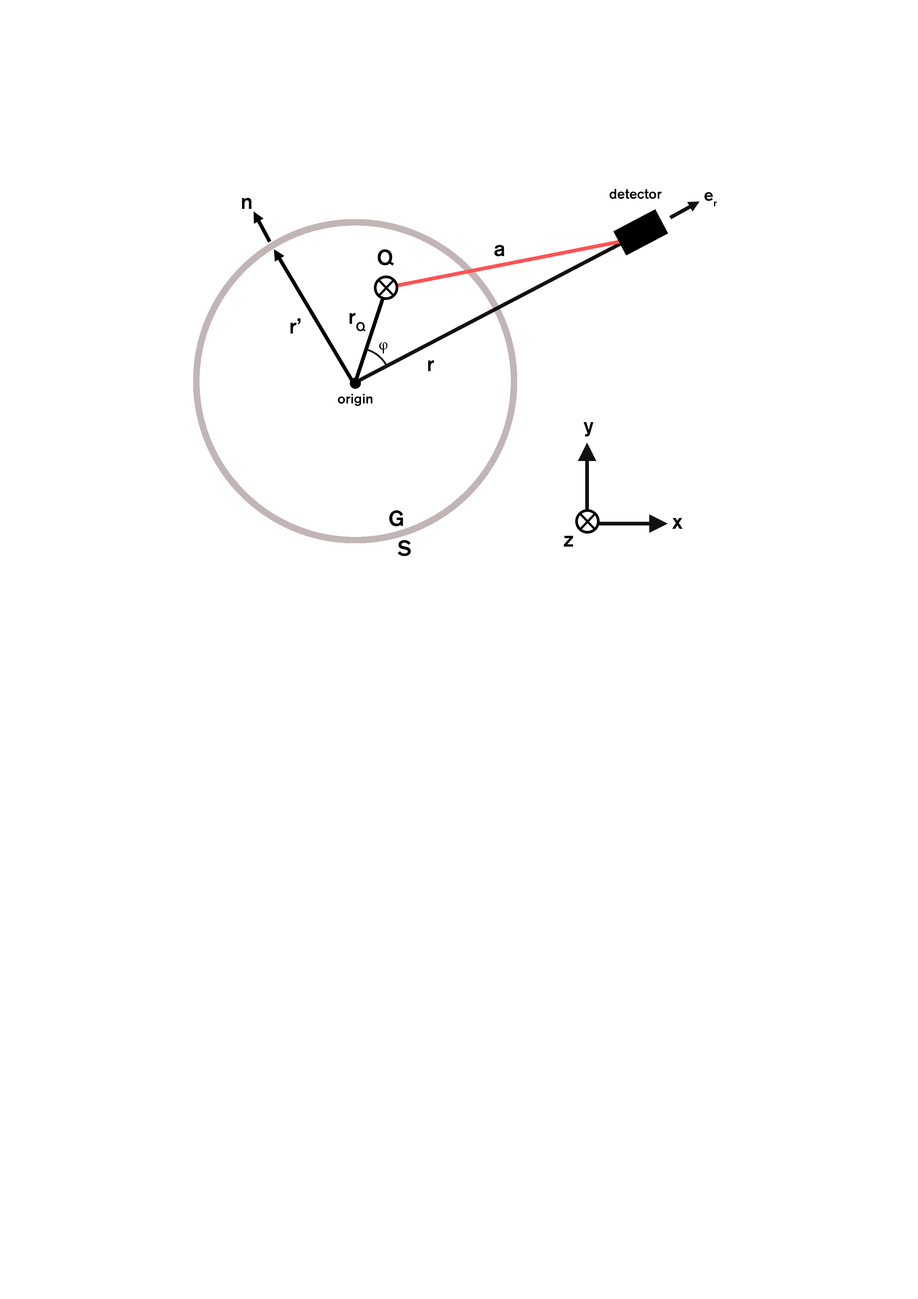
<style>
.page{position:relative;width:918px;height:1299px;background:#ffffff}
.page>*{position:absolute;margin:0}
.t1{font:21.6px "AkzidenzGroteskBQ-Medium";color:#000000}
.t2{font:13.9px "AkzidenzGroteskBQ-Medium";color:#000000}
.t3{font:17px "AkzidenzGroteskBQ-Medium";color:#000000}
.t4{font:27.8px "MinionPro-Regular";color:#000000}
</style>
<div class="page">
<p class="t1" style="left:242px;top:198px;width:10px;height:11px">n</p>
<p class="t2" style="left:609px;top:189px;width:53px;height:10px">detector</p>
<p class="t3" style="left:705px;top:192px;width:12px;height:15px">er</p>
<p class="t1" style="left:494px;top:245px;width:11px;height:12px">a</p>
<p class="t1" style="left:378px;top:249px;width:16px;height:17px">Q</p>
<p class="t1" style="left:349px;top:313px;width:17px;height:18px">rQ</p>
<p class="t1" style="left:290px;top:318px;width:11px;height:16px">r’</p>
<p class="t4" style="left:379px;top:342px;width:9px;height:12px">φ</p>
<p class="t1" style="left:428px;top:360px;width:6px;height:11px">r</p>
<p class="t2" style="left:338px;top:394px;width:34px;height:12px">origin</p>
<p class="t1" style="left:583px;top:422px;width:11px;height:14px">y</p>
<p class="t1" style="left:389px;top:510px;width:14px;height:16px">G</p>
<p class="t1" style="left:672px;top:518px;width:11px;height:11px">x</p>
<p class="t1" style="left:398px;top:540px;width:13px;height:16px">S</p>
<p class="t1" style="left:564px;top:536px;width:9px;height:11px">z</p>
</div>
